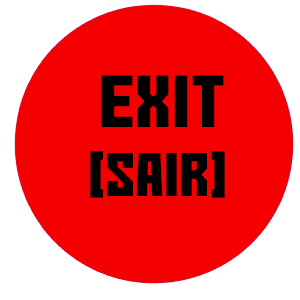
<style>
.page{position:relative;width:300px;height:300px;background:#f50000}
.page>*{position:absolute;margin:0}
.t1{font:72px "No-Continue";color:#000000}
.t2{font:60px "No-Continue";color:#000000}
</style>
<div class="page">
<p class="t1" style="left:101px;top:75px;width:123px;height:52px">EXIT</p>
<p class="t2" style="left:90px;top:151px;width:135px;height:47px">[SAIR]</p>
</div>
